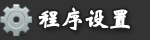
<style>
.page{position:relative;width:150px;height:40px;background:#333333}
.page>*{position:absolute;margin:0}
.t1{font:24px "STXinwei";letter-spacing:-0.05em;color:#ffffff;font-weight:bold}
</style>
<div class="page">
<p class="t1" style="left:38px;top:7px;width:92px;height:24px">程序设置</p>
</div>
